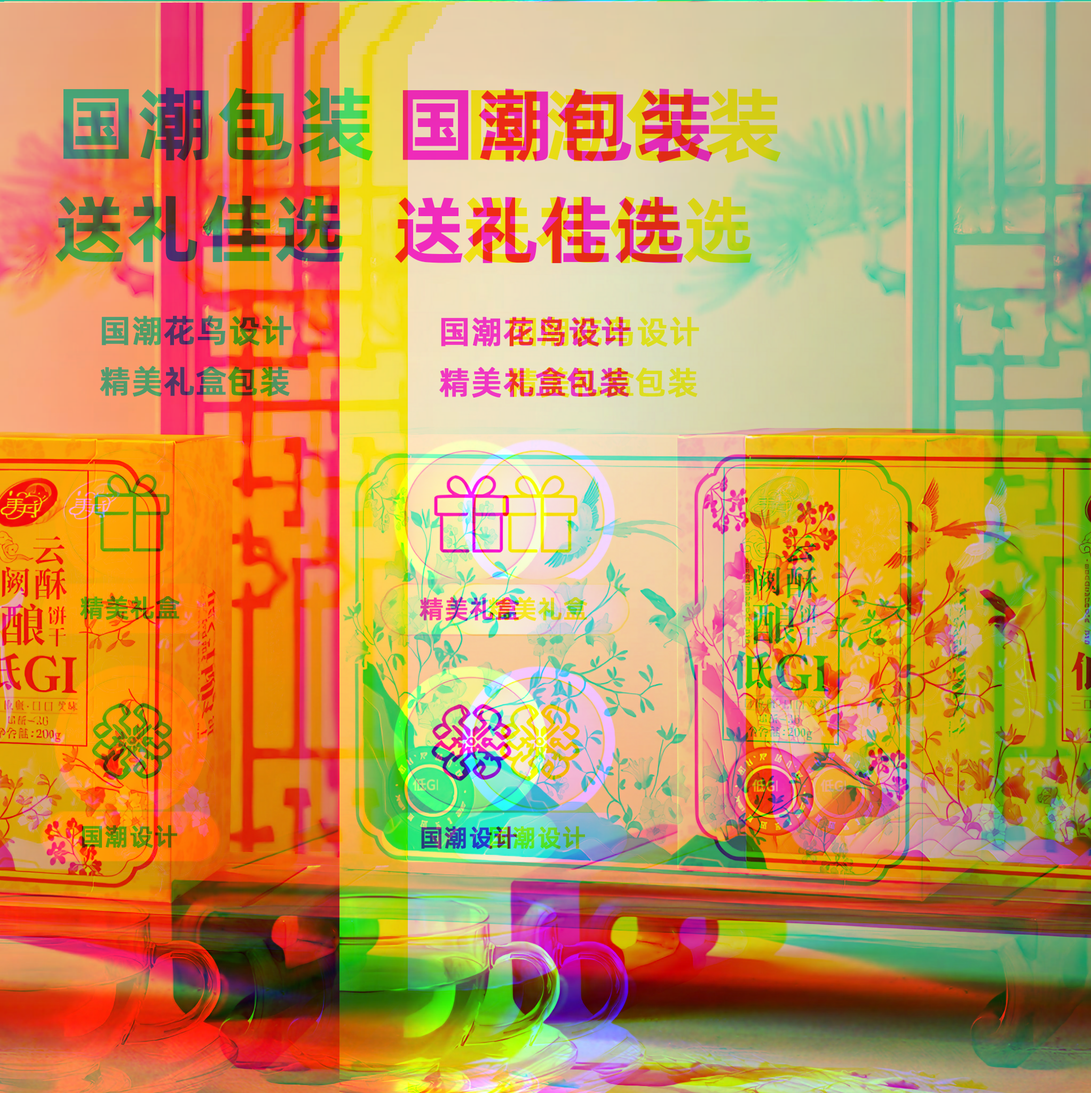
<style>
.page{position:relative;width:1091px;height:1093px}
.page>*{position:absolute;margin:0}
.t1{font:81.4px "AlibabaPuHuiTi-Bold"}
.t2{font:74.7px "AlibabaPuHuiTi-Bold"}
.t3{font:32px "AlibabaPuHuiTi-Medium";font-weight:bold}
.t4{font:31.6px "AlibabaPuHuiTi-Medium";font-weight:bold}
.t5{font:24.9px "AlibabaPuHuiTi-Medium";font-weight:bold}
.t6{font:13.8px "AdobeHeitiStd-Regular";font-weight:bold}
.t7{font:24.5px "AlibabaPuHuiTi-Medium";font-weight:bold}
</style>
<div class="page">
<p class="t1" style="left:63px;top:86px;width:310px;height:75px">国潮包装</p>
<p class="t2" style="left:55px;top:194px;width:289px;height:68px">送礼佳选</p>
<p class="t3" style="left:101px;top:314px;width:190px;height:31px">国潮花鸟设计</p>
<p class="t4" style="left:100px;top:365px;width:190px;height:30px">精美礼盒包装</p>
<p class="t5" style="left:80px;top:595px;width:100px;height:24px">精美礼盒</p>
<p class="t6" style="left:413px;top:777px;width:25px;height:13px">低GI</p>
<p class="t7" style="left:82px;top:824px;width:95px;height:23px">国潮设计</p>
</div>
